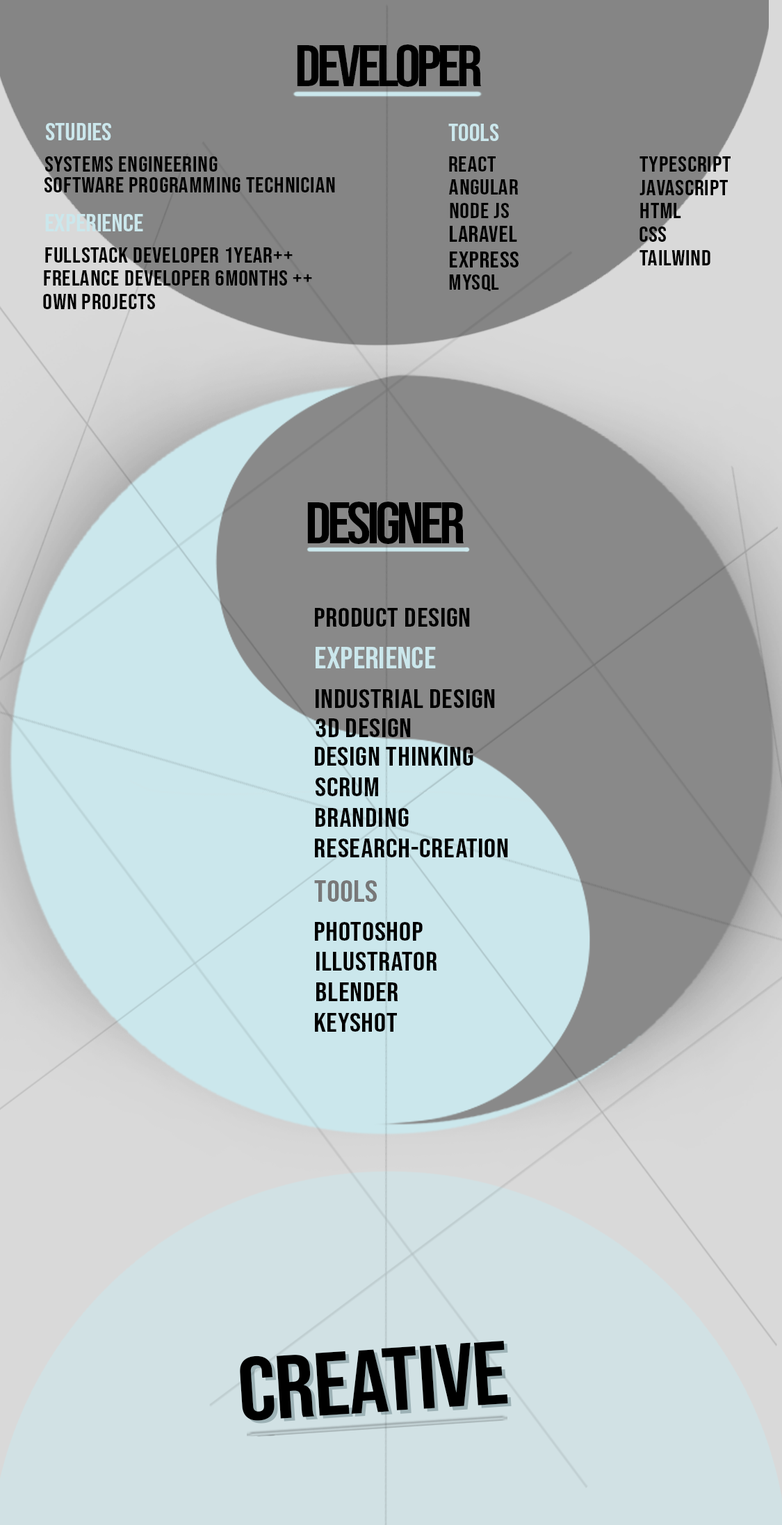
<style>
.page{position:relative;width:782px;height:1525px}
.page>*{position:absolute;margin:0}
.t1{font:58.1px "BebasNeue-Regular";letter-spacing:-0.06em;color:#000000;scale:1.1 1}
.t2{font:24.5px "BebasNeue-Regular";color:#cbe7ec;scale:1.1 1}
.t3{font:24.4px "BebasNeue-Regular";color:#cbe7ec;scale:1.1 1}
.t4{font:21.8px "BebasNeue-Regular";letter-spacing:0.02em;color:#000000;scale:1.1 1}
.t5{font:21.7px "BebasNeue-Regular";letter-spacing:0.02em;color:#000000;scale:1.1 1}
.t6{font:21.7px "BebasNeue-Regular";letter-spacing:0.02em;color:#000000;scale:1.11 1}
.t7{font:22.6px "BebasNeue-Regular";letter-spacing:0.02em;color:#000000;scale:1.1 1}
.t8{font:58.1px "BebasNeue-Regular";letter-spacing:-0.06em;color:#000000;scale:1.11 1}
.t9{font:26.8px "BebasNeue-Regular";letter-spacing:0.02em;color:#000000;scale:1.11 1}
.t10{font:30.1px "BebasNeue-Regular";color:#cbe7ec;scale:1.11 1}
.t11{font:30.1px "BebasNeue-Regular";color:#787878;scale:1.11 1}
.t12{font:89.5px "BebasNeue-Regular";letter-spacing:-0.01em;color:#000000;scale:1.11 1}
.t13{font:89.5px "BebasNeue-Regular";letter-spacing:-0.01em;scale:1.11 1}
</style>
<div class="page">
<p class="t1" style="left:297px;top:44px;width:184px;height:43px">developer</p>
<p class="t2" style="left:46px;top:123px;width:65px;height:17px">studies</p>
<p class="t3" style="left:448px;top:124px;width:51px;height:17px">tools</p>
<p class="t4" style="left:45px;top:156px;width:173px;height:16px">Systems engineering</p>
<p class="t5" style="left:449px;top:156px;width:46px;height:16px">react</p>
<p class="t6" style="left:639px;top:156px;width:91px;height:16px">typescript</p>
<p class="t4" style="left:44px;top:177px;width:291px;height:15px">Software programming technician</p>
<p class="t5" style="left:449px;top:179px;width:69px;height:16px">angular</p>
<p class="t6" style="left:639px;top:180px;width:89px;height:15px">javascript</p>
<p class="t5" style="left:450px;top:203px;width:59px;height:15px">node js</p>
<p class="t6" style="left:640px;top:203px;width:41px;height:15px">html</p>
<p class="t2" style="left:45px;top:214px;width:98px;height:17px">experience</p>
<p class="t7" style="left:450px;top:226px;width:67px;height:16px">laravel</p>
<p class="t6" style="left:639px;top:227px;width:27px;height:15px">css</p>
<p class="t4" style="left:45px;top:247px;width:248px;height:16px">fullstack developer 1year++</p>
<p class="t7" style="left:450px;top:252px;width:68px;height:16px">express</p>
<p class="t6" style="left:639px;top:250px;width:71px;height:15px">tailwind</p>
<p class="t4" style="left:44px;top:270px;width:268px;height:16px">frelance developer 6months ++</p>
<p class="t5" style="left:449px;top:274px;width:50px;height:17px">Mysql</p>
<p class="t4" style="left:43px;top:294px;width:112px;height:15px">own projects</p>
<p class="t8" style="left:307px;top:502px;width:156px;height:42px">designer</p>
<p class="t9" style="left:315px;top:608px;width:155px;height:19px">product design</p>
<p class="t10" style="left:315px;top:647px;width:121px;height:21px">experience</p>
<p class="t9" style="left:315px;top:689px;width:180px;height:19px">industrial design</p>
<p class="t9" style="left:315px;top:719px;width:96px;height:18px">3d design</p>
<p class="t9" style="left:315px;top:747px;width:158px;height:19px">Design Thinking</p>
<p class="t9" style="left:315px;top:778px;width:63px;height:18px">scrum</p>
<p class="t9" style="left:315px;top:808px;width:94px;height:19px">branding</p>
<p class="t9" style="left:315px;top:839px;width:193px;height:19px">Research-Creation</p>
<p class="t11" style="left:314px;top:880px;width:63px;height:22px">tools</p>
<p class="t9" style="left:315px;top:922px;width:108px;height:19px">photoshop</p>
<p class="t9" style="left:316px;top:952px;width:121px;height:19px">illustrator</p>
<p class="t9" style="left:316px;top:983px;width:82px;height:18px">blender</p>
<p class="t9" style="left:315px;top:1013px;width:82px;height:19px">keyshot</p>
<p class="t12" style="left:240px;top:1340px;width:268px;height:81px;rotate:-4deg">creative</p>
<p class="t13" style="left:243px;top:1343px;width:268px;height:81px;rotate:-4deg">creative</p>
</div>
